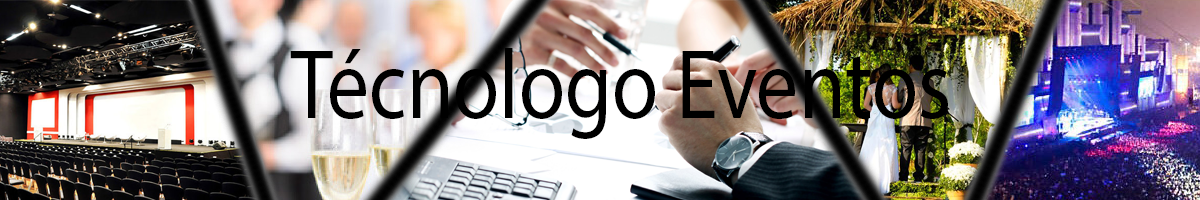
<style>
.page{position:relative;width:1200px;height:200px}
.page>*{position:absolute;margin:0}
.t1{font:99px "MyriadPro-Regular";color:#000000;scale:0.85 1}
</style>
<div class="page">
<p class="t1" style="left:290px;top:48px;width:658px;height:91px">Técnologo Eventos</p>
</div>
